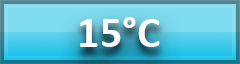
<style>
.page{position:relative;width:240px;height:64px}
.page>*{position:absolute;margin:0}
.t1{font:44.4px "Calibri-Bold";color:#ffffff}
</style>
<div class="page">
<p class="t1" style="left:80px;top:17px;width:80px;height:30px">15°C</p>
</div>
